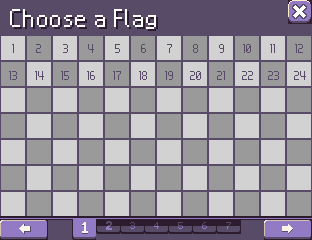
<style>
.page{position:relative;width:312px;height:240px;background:#9a9a9a}
.page>*{position:absolute;margin:0}
.t1{font:32px "Nintendo-DS-BIOS";letter-spacing:0.04em;color:#ffffff}
.t2{font:32px "Nintendo-DS-BIOS";letter-spacing:0.04em;color:#2d1b2e}
.t3{font:16px "Nintendo-DS-BIOS";color:#574b67}
.t4{font:10px "Bitsy";letter-spacing:0.04em;color:#574b67}
.t5{font:10px "Bitsy";letter-spacing:0.04em}
</style>
<div class="page">
<p class="t1" style="left:10px;top:9px;width:146px;height:20px">Choose a Flag</p>
<p class="t2" style="left:12px;top:11px;width:146px;height:20px">Choose a Flag</p>
<p class="t3" style="left:12px;top:44px;width:2px;height:9px">1</p>
<p class="t3" style="left:36px;top:44px;width:5px;height:9px">2</p>
<p class="t3" style="left:63px;top:44px;width:5px;height:9px">3</p>
<p class="t3" style="left:88px;top:44px;width:6px;height:9px">4</p>
<p class="t3" style="left:115px;top:44px;width:5px;height:9px">5</p>
<p class="t3" style="left:141px;top:44px;width:5px;height:9px">6</p>
<p class="t3" style="left:167px;top:44px;width:5px;height:9px">7</p>
<p class="t3" style="left:193px;top:44px;width:5px;height:9px">8</p>
<p class="t3" style="left:219px;top:44px;width:5px;height:9px">9</p>
<p class="t3" style="left:243px;top:44px;width:8px;height:9px">10</p>
<p class="t3" style="left:270px;top:44px;width:5px;height:9px">11</p>
<p class="t3" style="left:295px;top:44px;width:8px;height:9px">12</p>
<p class="t3" style="left:9px;top:71px;width:8px;height:9px">13</p>
<p class="t3" style="left:35px;top:71px;width:9px;height:9px">14</p>
<p class="t3" style="left:61px;top:71px;width:8px;height:9px">15</p>
<p class="t3" style="left:87px;top:71px;width:8px;height:9px">16</p>
<p class="t3" style="left:113px;top:71px;width:8px;height:9px">17</p>
<p class="t3" style="left:139px;top:71px;width:8px;height:9px">18</p>
<p class="t3" style="left:165px;top:71px;width:8px;height:9px">19</p>
<p class="t3" style="left:190px;top:71px;width:11px;height:9px">20</p>
<p class="t3" style="left:217px;top:71px;width:8px;height:9px">21</p>
<p class="t3" style="left:242px;top:71px;width:11px;height:9px">22</p>
<p class="t3" style="left:268px;top:71px;width:11px;height:9px">23</p>
<p class="t3" style="left:294px;top:71px;width:12px;height:9px">24</p>
<p class="t4" style="left:130px;top:222px;width:5px;height:7px">3</p>
<p class="t5" style="left:130px;top:222px;width:5px;height:7px">3</p>
<p class="t5" style="left:154px;top:222px;width:5px;height:7px">4</p>
<p class="t5" style="left:154px;top:222px;width:5px;height:7px">4</p>
<p class="t4" style="left:178px;top:222px;width:5px;height:7px">5</p>
<p class="t5" style="left:178px;top:222px;width:5px;height:7px">5</p>
<p class="t5" style="left:202px;top:222px;width:5px;height:7px">6</p>
<p class="t5" style="left:202px;top:222px;width:5px;height:7px">6</p>
<p class="t4" style="left:226px;top:222px;width:5px;height:7px">7</p>
<p class="t4" style="left:226px;top:222px;width:5px;height:7px">7</p>
</div>
